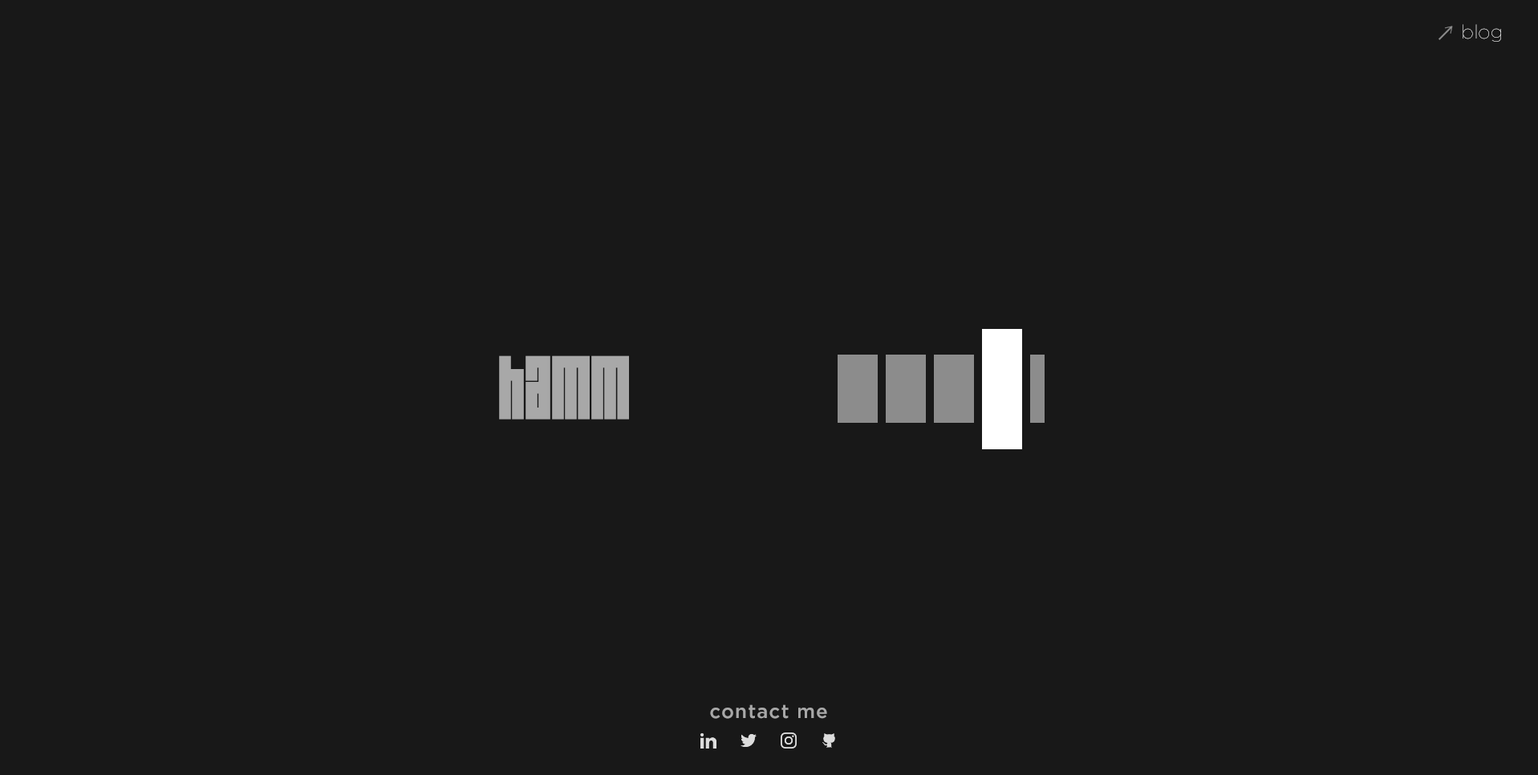
<style>
.page{position:relative;width:1538px;height:775px;background:#181818}
.page>*{position:absolute;margin:0}
.t1{font:19.3px "iCielGotham-Thin";letter-spacing:0.01em;color:#ffffff}
.t2{font:68.2px "Blackout";letter-spacing:0.01em;color:#a8a8a8}
.t3{font:19.3px "iCielGotham-Medium";letter-spacing:0.05em;color:#a8a8a8}
</style>
<div class="page">
<p class="t1" style="left:1463px;top:24px;width:38px;height:18px">blog</p>
<p class="t2" style="left:499px;top:355px;width:130px;height:65px">hamm</p>
<p class="t3" style="left:710px;top:705px;width:117px;height:14px">contact me</p>
</div>
